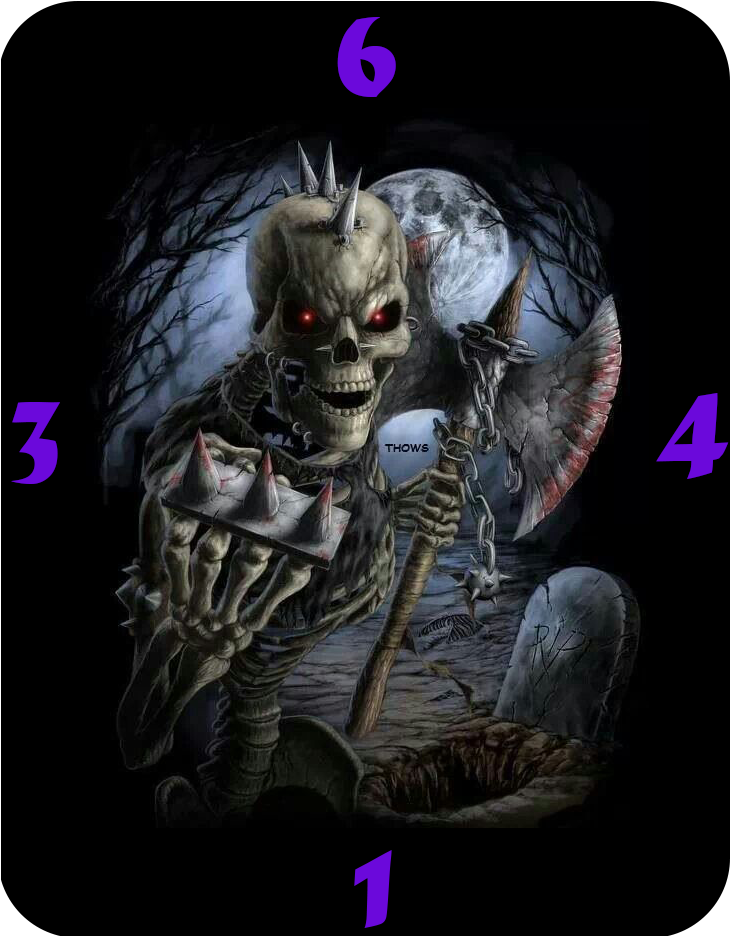
<style>
.page{position:relative;width:732px;height:937px;background:#000000}
.page>*{position:absolute;margin:0}
.t1{font:125px "MaturaMTScriptCapitals";color:#6b09db}
</style>
<div class="page">
<p class="t1" style="left:337px;top:17px;width:59px;height:80px">6</p>
<p class="t1" style="left:656px;top:393px;width:73px;height:86px">4</p>
<p class="t1" style="left:11px;top:402px;width:50px;height:82px">3</p>
</div>
